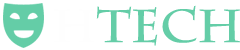
<style>
.page{position:relative;width:240px;height:50px;background:#ffffff}
.page>*{position:absolute;margin:0}
.t1{font:46px "CharlemagneStd-Bold";color:#64cda7}
.t2{font:46px "CharlemagneStd-Bold";color:#fefefe}
</style>
<div class="page">
<p class="t1" style="left:54px;top:5px;width:186px;height:41px"><span class="t2">h</span>TECH</p>
</div>
